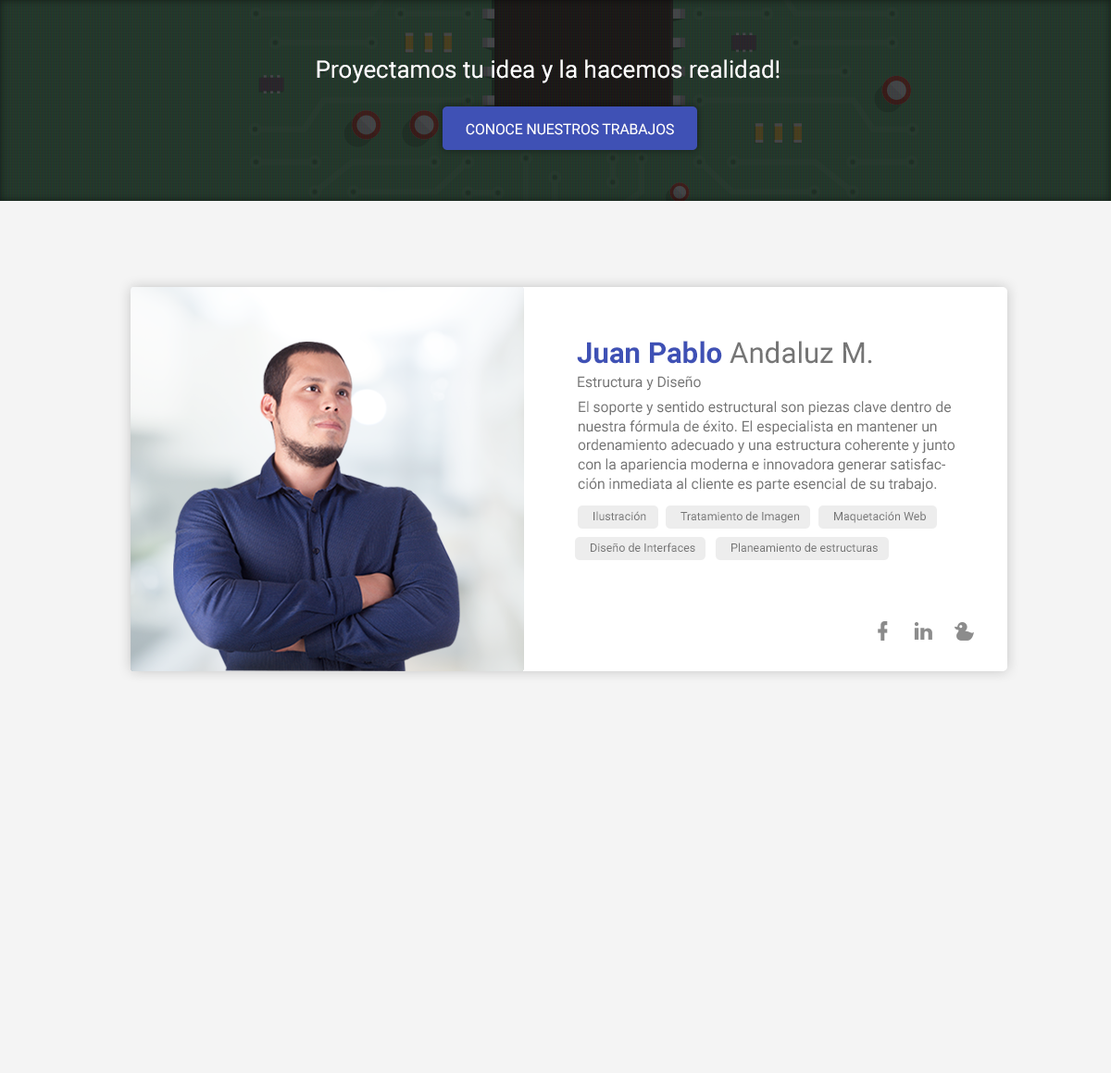
<style>
.page{position:relative;width:1111px;height:1073px;background:#f4f4f4}
.page>*{position:absolute;margin:0}
.t1{font:24.1px "Roboto-Regular";color:#ffffff}
.t2{font:14.5px "Roboto-Regular";color:#ffffff;text-transform:uppercase}
.t3{font:14.5px/24.1px "Roboto-Regular";color:#757575}
.t4{font:28.9px/24.1px "Roboto-Bold";color:#3f51b5}
.t5{font:28.9px/24.1px "Roboto-Regular";color:#757575}
.t6{font:14.5px/19.3px "Roboto-Regular";color:#757575}
.t7{font:11.6px "Roboto-Regular";color:#757575}
</style>
<div class="page">
<p class="t1" style="left:317px;top:59px;width:463px;height:24px">Proyectamos tu idea y la hacemos realidad!</p>
<p class="t2" style="left:466px;top:123px;width:208px;height:12px">Conoce nuestros trabajos</p>
<p class="t3" style="left:577px;top:341px;width:295px;height:50px"><span class="t4">Juan Pablo </span><span class="t5">Andaluz M.<br></span>Estructura y Diseño</p>
<p class="t6" style="left:578px;top:401px;width:377px;height:92px">El soporte y sentido estructural son piezas clave dentro de nuestra fórmula de éxito. El especialista en mantener un ordenamiento adecuado y una estructura coherente y junto con la apariencia moderna e innovadora generar satisfacción inmediata al cliente es parte esencial de su trabajo.</p>
<p class="t7" style="left:594px;top:511px;width:52px;height:9px">Ilustración</p>
<p class="t7" style="left:681px;top:511px;width:118px;height:12px">Tratamiento de Imagen</p>
<p class="t7" style="left:834px;top:511px;width:92px;height:12px">Maquetación Web</p>
<p class="t7" style="left:591px;top:543px;width:104px;height:9px">Diseño de Interfaces</p>
<p class="t7" style="left:731px;top:543px;width:147px;height:9px">Planeamiento de estructuras</p>
</div>
